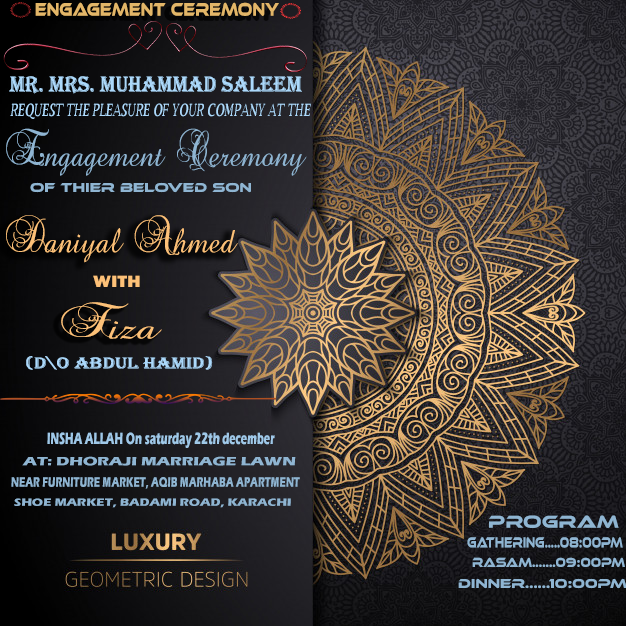
<style>
.page{position:relative;width:626px;height:626px}
.page>*{position:absolute;margin:0}
.t1{font:18.9px "EthnocentricRg-Regular";color:#e3b668;scale:0.73 1}
.t2{font:22.6px "Algerian";color:#acd9fb;scale:0.93 1}
.t3{font:17.1px "LucidaBright-DemiItalic";color:#addafc;scale:0.63 1}
.t4{font:35px "Precious";color:#8fb5d2;scale:0.9 1}
.t5{font:13.4px "EthnocentricRg-Regular";color:#8fb5d2}
.t6{font:34.9px "Precious";color:#fdc178;scale:0.95 1}
.t7{font:16.9px "FranklinGothic-Heavy";color:#fdc178;scale:1.18 1}
.t8{font:34.3px "Precious";color:#fdc178;scale:1.41 1}
.t9{font:16.2px "Algerian";color:#acd9fb;scale:1.25 1}
.t10{font:17.1px "ErasITC-Bold";color:#9fc8e8;scale:0.62 1}
.t11{font:12.5px "ErasITC-Bold";color:#8fb5d2;scale:1.33 1}
.t12{font:14.3px "ErasITC-Bold";color:#8fb5d2;scale:0.67 1}
.t13{font:10.7px "ErasITC-Bold";color:#8fb5d2;scale:1.21 1}
.t14{font:18px "EthnocentricRg-Regular";color:#8fb5d2}
.t15{font:15.3px "EthnocentricRg-Regular";color:#8fb5d2;scale:0.65 1}
.t16{font:13.4px "EthnocentricRg-Regular";color:#8fb5d2;scale:0.82 1}
</style>
<div class="page">
<p class="t1" style="left:35px;top:2px;width:244px;height:14px">ENGAGEMENT CEREMONY</p>
<p class="t2" style="left:9px;top:76px;width:293px;height:18px">MR. MRS. MUHAMMAD SALEEM</p>
<p class="t3" style="left:10px;top:103px;width:301px;height:16px">REQUEST THE PLEASURE OF YOUR COMPANY AT THE</p>
<p class="t4" style="left:6px;top:128px;width:301px;height:48px">Engagement Ceremony</p>
<p class="t5" style="left:30px;top:182px;width:221px;height:11px">OF THIER BELOVED SON</p>
<p class="t6" style="left:6px;top:215px;width:232px;height:48px">Daniyal Ahmed</p>
<p class="t7" style="left:93px;top:275px;width:47px;height:12px">WITH</p>
<p class="t8" style="left:61px;top:302px;width:101px;height:37px">Fiza</p>
<p class="t9" style="left:26px;top:356px;width:187px;height:14px">(D\O ABDUL HAMID)</p>
<p class="t10" style="left:47px;top:432px;width:228px;height:16px">INSHA ALLAH On saturday 22th december</p>
<p class="t11" style="left:22px;top:456px;width:274px;height:10px">AT: DHORAJI MARRIAGE LAWN</p>
<p class="t12" style="left:11px;top:477px;width:289px;height:12px">NEAR FURNITURE MARKET, AQIB MARHABA APARTMENT</p>
<p class="t13" style="left:14px;top:498px;width:277px;height:10px">SHOE MARKET, BADAMI ROAD, KARACHI</p>
<p class="t14" style="left:489px;top:515px;width:130px;height:13px">PROGRAM</p>
<p class="t15" style="left:467px;top:537px;width:156px;height:11px">Gathering.....08:00pm</p>
<p class="t16" style="left:472px;top:557px;width:153px;height:10px">Rasam.......09:00pm</p>
<p class="t5" style="left:458px;top:578px;width:169px;height:11px">Dinner......10:00pm</p>
</div>
